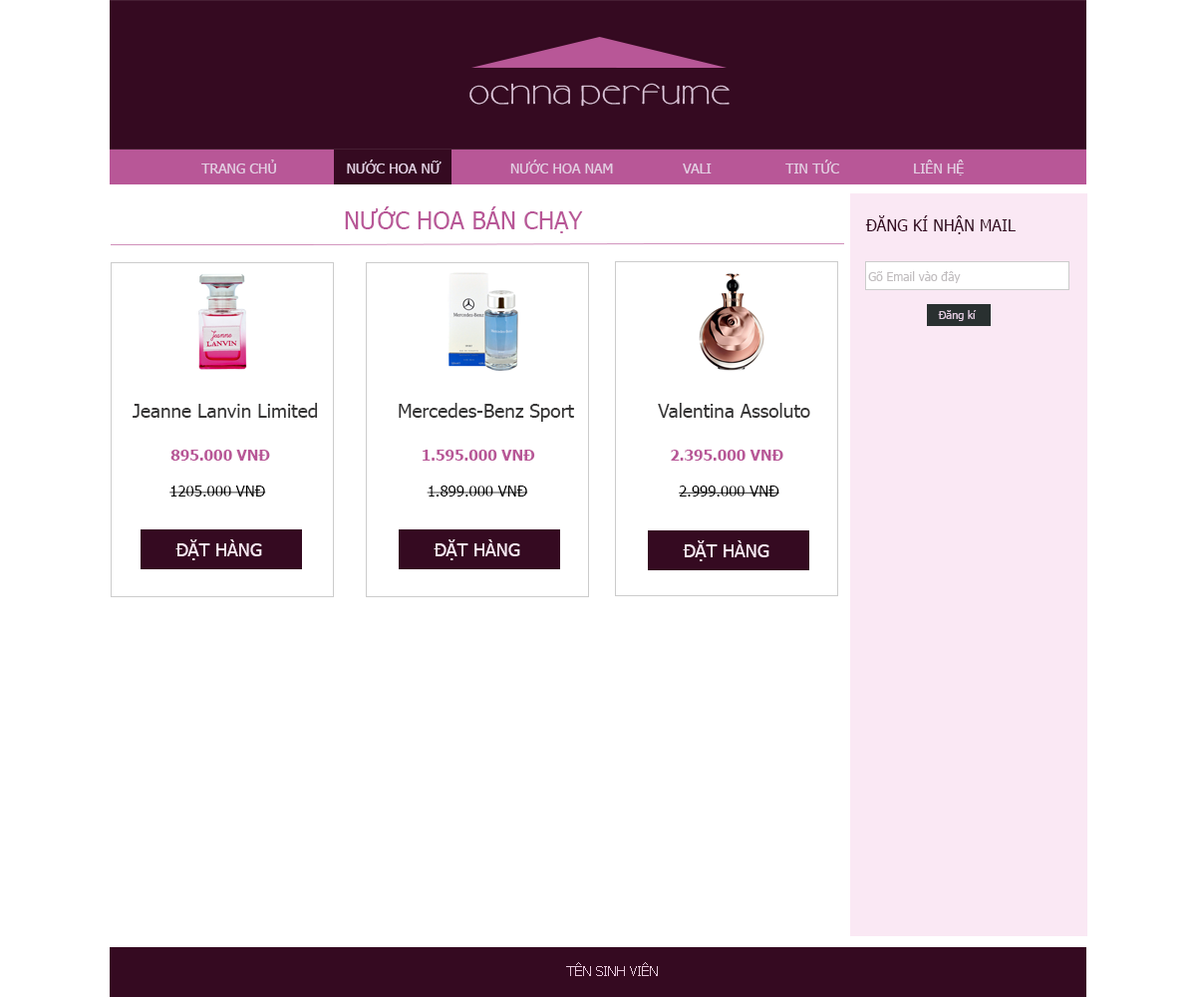
<style>
.page{position:relative;width:1196px;height:997px;background:#ffffff}
.page>*{position:absolute;margin:0}
.t1{font:29.9px "UTM-Camellia";letter-spacing:0.075em;color:#e1c7dd}
.t2{font:14px "Tahoma";color:#e3cde2}
.t3{font:23.9px "Tahoma";color:#b85797;text-transform:uppercase}
.t4{font:15.9px "Tahoma";color:#350a21;text-transform:uppercase}
.t5{font:12px "Tahoma";color:#c1bdbf}
.t6{font:11px "Tahoma";color:#e3cde2}
.t7{font:18.9px "Tahoma";color:#363535}
.t8{font:15px "Tahoma-Bold";color:#b85797}
.t9{font:15px "Tahoma";color:#010101}
.t10{font:15px "Tahoma";color:#000000}
.t11{font:17.9px "Tahoma";color:#fae8f4}
.t12{font:14px "Tahoma";color:#e5c7db}
</style>
<div class="page">
<p class="t1" style="left:470px;top:83px;width:260px;height:24px">ochna perfume</p>
<p class="t2" style="left:201px;top:159px;width:763px;height:16px">TRANG CHỦ                NƯỚC HOA NỮ                NƯỚC HOA NAM                VALI                 TIN TỨC                 LIÊN HỆ</p>
<p class="t3" style="left:345px;top:206px;width:238px;height:27px">Nước hoa bán chạy</p>
<p class="t4" style="left:865px;top:215px;width:151px;height:19px">đăng kí nhận mail</p>
<p class="t5" style="left:868px;top:271px;width:93px;height:12px">Gõ Email vào đây</p>
<p class="t6" style="left:938px;top:310px;width:39px;height:11px">Đăng kí</p>
<p class="t7" style="left:133px;top:403px;width:185px;height:15px">Jeanne Lanvin Limited</p>
<p class="t7" style="left:399px;top:403px;width:175px;height:19px">Mercedes-Benz Sport</p>
<p class="t7" style="left:658px;top:403px;width:152px;height:15px">Valentina Assoluto</p>
<p class="t8" style="left:170px;top:450px;width:100px;height:11px">895.000 VNĐ</p>
<p class="t8" style="left:423px;top:450px;width:112px;height:11px">1.595.000 VNĐ</p>
<p class="t8" style="left:671px;top:450px;width:113px;height:11px">2.395.000 VNĐ</p>
<p class="t9" style="left:169px;top:485px;width:97px;height:11px">1205.000 VNĐ</p>
<p class="t10" style="left:427px;top:485px;width:101px;height:11px">1.899.000 VNĐ</p>
<p class="t9" style="left:679px;top:485px;width:101px;height:11px">2.999.000 VNĐ</p>
<p class="t11" style="left:175px;top:539px;width:87px;height:21px">ĐẶT HÀNG</p>
<p class="t11" style="left:434px;top:539px;width:86px;height:21px">ĐẶT HÀNG</p>
<p class="t11" style="left:683px;top:540px;width:87px;height:21px">ĐẶT HÀNG</p>
<p class="t12" style="left:566px;top:962px;width:92px;height:14px">TÊN SINH VIÊN</p>
</div>
